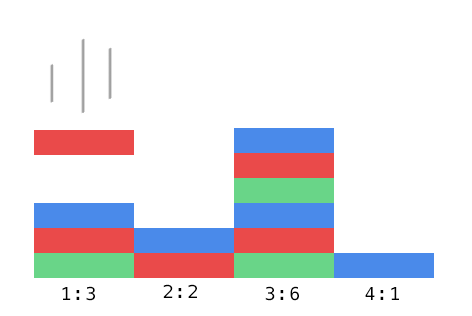
<style>
.page{position:relative;width:472px;height:316px;background:#ffffff}
.page>*{position:absolute;margin:0}
.t1{font:18px "Menlo-Regular";letter-spacing:0.08em;color:#000000}
</style>
<div class="page">
<p class="t1" style="left:62px;top:286px;width:33px;height:15px">1:3</p>
<p class="t1" style="left:163px;top:284px;width:34px;height:14px">2:2</p>
<p class="t1" style="left:265px;top:286px;width:34px;height:15px">3:6</p>
<p class="t1" style="left:365px;top:287px;width:34px;height:13px">4:1</p>
</div>
